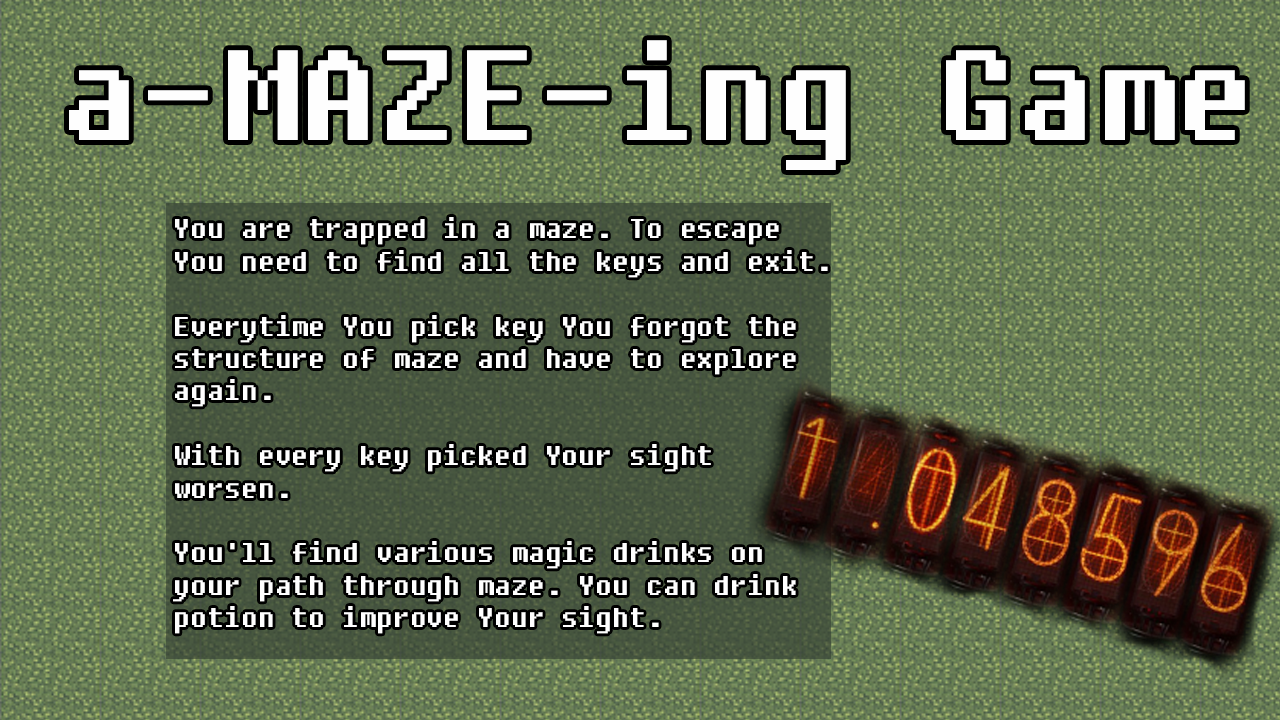
<style>
.page{position:relative;width:1280px;height:720px}
.page>*{position:absolute;margin:0}
.t1{font:127.6px "Fixedsys";color:#fefefe}
.t2{font:27px "Fixedsys";color:#ffffff}
</style>
<div class="page">
<p class="t1" style="left:69px;top:40px;width:1176px;height:130px">a-MAZE-ing Game</p>
<p class="t2" style="left:173px;top:217px;width:655px;height:417px">You are trapped in a maze. To escape You need to find all the keys and exit. <br><br>Everytime You pick key You forgot the structure of maze and have to explore again. <br><br>With every key picked Your sight worsen. <br><br>You'll find various magic drinks on your path through maze. You can drink potion to improve Your sight.</p>
</div>
